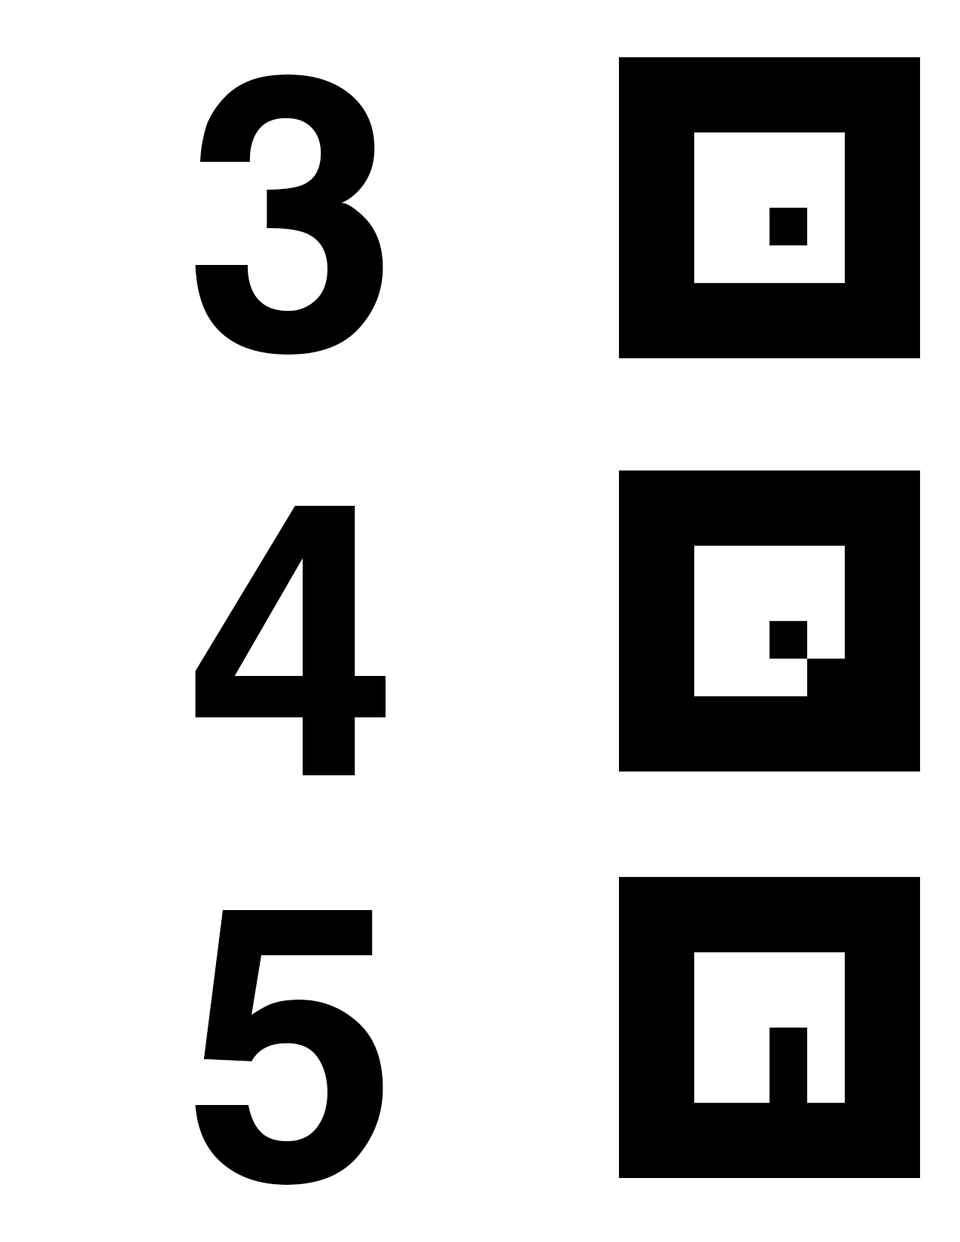
<style>
.page{position:relative;width:960px;height:1242px;background:#ffffff}
.page>*{position:absolute;margin:0}
.t1{font:382.7px "Helvetica-Bold";letter-spacing:0.01em;color:#000000}
</style>
<div class="page">
<p class="t1" style="left:195px;top:75px;width:188px;height:280px">3</p>
<p class="t1" style="left:195px;top:506px;width:191px;height:269px">4</p>
<p class="t1" style="left:195px;top:910px;width:188px;height:275px">5</p>
</div>
